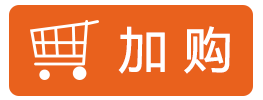
<style>
.page{position:relative;width:263px;height:100px;background:#e9611d}
.page>*{position:absolute;margin:0}
.t1{font:48px "MicrosoftYaHei";color:#ffffff;font-weight:bold}
</style>
<div class="page">
<p class="t1" style="left:118px;top:26px;width:112px;height:48px">加 购</p>
</div>
